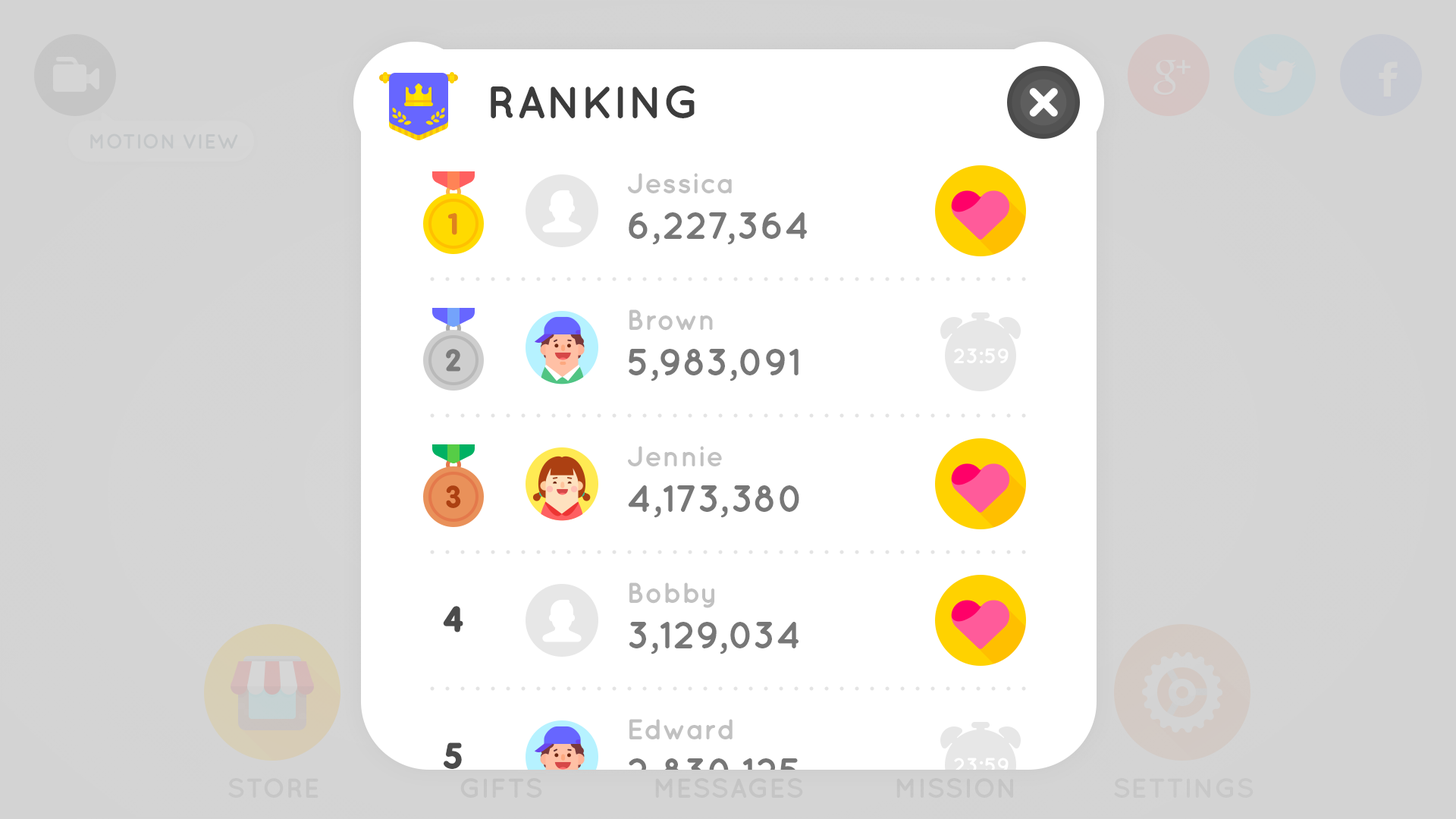
<style>
.page{position:relative;width:1456px;height:819px;background:#ffffff}
.page>*{position:absolute;margin:0}
.t1{font:45.5px "Quicksand-Bold";color:#3c3c3c;text-transform:uppercase}
.t2{font:28.8px "Quicksand-Bold";color:#c1c1c1}
.t3{font:28.8px "BPreplay-Bold";color:#df821e;scale:1.05 1}
.t4{font:37.9px "Quicksand-Bold";color:#777777}
.t5{font:28.8px "BPreplay-Bold";color:#7b7b7b;scale:1.05 1}
.t6{font:21.2px "Quicksand-Bold";color:#ffffff}
.t7{font:28.8px "BPreplay-Bold";color:#ac4012;scale:1.05 1}
.t8{font:34.6px "BPreplay-Bold";color:#4b4b4b;scale:1.05 1}
.t9{font:37.9px "Quicksand-Bold"}
</style>
<div class="page">
<p class="t1" style="left:491px;top:85px;width:204px;height:33px">Ranking</p>
<p class="t2" style="left:628px;top:173px;width:104px;height:20px">Jessica</p>
<p class="t3" style="left:447px;top:213px;width:10px;height:22px">1</p>
<p class="t4" style="left:629px;top:212px;width:178px;height:33px">6,227,364</p>
<p class="t2" style="left:629px;top:309px;width:84px;height:22px">Brown</p>
<p class="t5" style="left:446px;top:349px;width:14px;height:23px">2</p>
<p class="t4" style="left:629px;top:349px;width:170px;height:32px">5,983,091</p>
<p class="t6" style="left:954px;top:348px;width:55px;height:16px">23:59</p>
<p class="t2" style="left:628px;top:446px;width:94px;height:20px">Jennie</p>
<p class="t7" style="left:446px;top:485px;width:15px;height:23px">3</p>
<p class="t4" style="left:628px;top:485px;width:171px;height:33px">4,173,380</p>
<p class="t2" style="left:629px;top:582px;width:85px;height:26px">Bobby</p>
<p class="t8" style="left:443px;top:606px;width:20px;height:26px">4</p>
<p class="t4" style="left:629px;top:622px;width:170px;height:32px">3,129,034</p>
<p class="t2" style="left:629px;top:719px;width:104px;height:20px">Edward</p>
<p class="t8" style="left:444px;top:742px;width:18px;height:27px">5</p>
<p class="t9" style="left:628px;top:758px;width:170px;height:33px">2,830,125</p>
<p class="t6" style="left:954px;top:758px;width:55px;height:15px">23:59</p>
</div>
